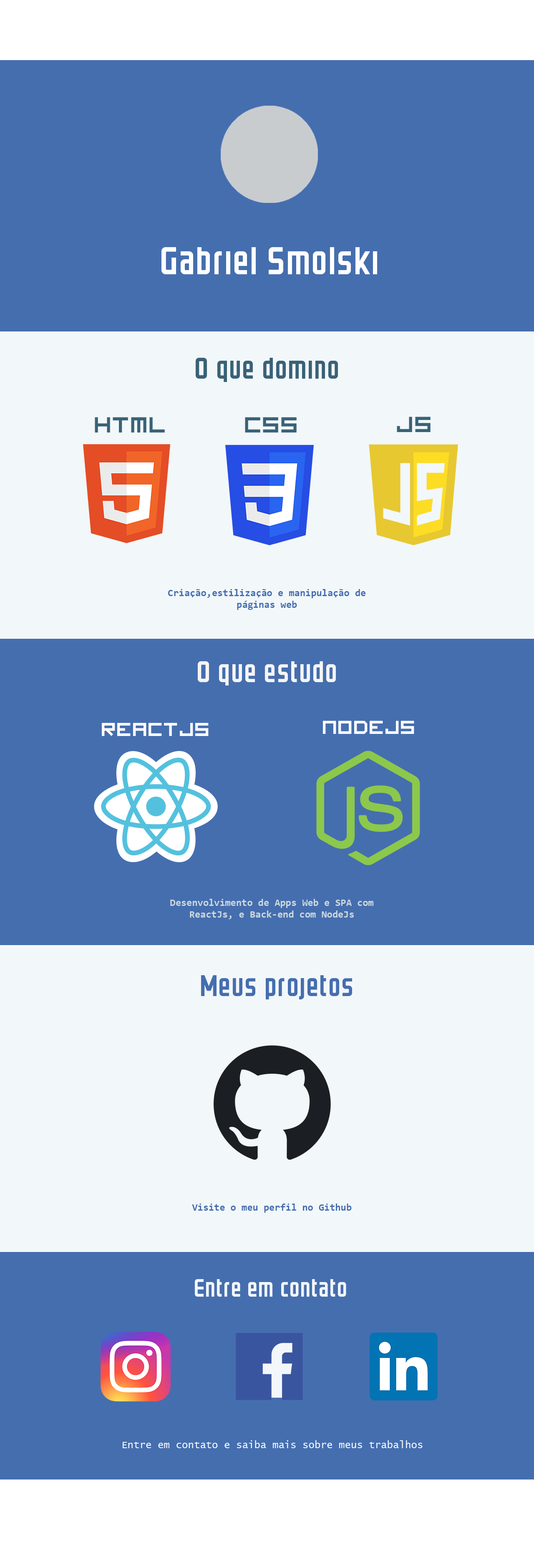
<style>
.page{position:relative;width:534px;height:1568px;background:#456eaf}
.page>*{position:absolute;margin:0}
.t1{font:31.3px "GRAYSTROKE";color:#ffffff}
.t2{font:24.2px "GRAYSTROKE";color:#396277}
.t3{font:10px "Consolas-Bold";color:#456eaf}
.t4{font:24.2px "GRAYSTROKE";color:#f5f5f5}
.t5{font:25.5px "imagine-font";color:#ffffff}
.t6{font:10px "Consolas-Bold";color:#ccd8de}
.t7{font:24.2px "GRAYSTROKE";color:#456eaf}
.t8{font:20px "GRAYSTROKE";color:#f2f7fa}
.t9{font:10px "LucidaConsole";color:#f2f7fa}
</style>
<div class="page">
<p class="t1" style="left:162px;top:247px;width:215px;height:27px">Gabriel Smolski</p>
<p class="t2" style="left:196px;top:358px;width:142px;height:24px">O que domino</p>
<p class="t3" style="left:168px;top:589px;width:198px;height:21px;text-align:center">Criação,estilização e manipulação de páginas web</p>
<p class="t4" style="left:198px;top:661px;width:138px;height:24px">O que estudo</p>
<p class="t5" style="left:102px;top:723px;width:107px;height:13px">ReactJs</p>
<p class="t5" style="left:323px;top:721px;width:92px;height:13px">NODEJS</p>
<p class="t6" style="left:170px;top:899px;width:204px;height:20px;text-align:center">Desenvolvimento de Apps Web e SPA com ReactJs, e Back-end com NodeJs</p>
<p class="t7" style="left:201px;top:975px;width:151px;height:24px">Meus projetos</p>
<p class="t3" style="left:192px;top:1204px;width:160px;height:9px">Visite o meu perfil no Github</p>
<p class="t8" style="left:195px;top:1279px;width:151px;height:18px">Entre em contato</p>
<p class="t9" style="left:123px;top:1440px;width:300px;height:8px">Entre em contato e saiba mais sobre meus trabalhos</p>
</div>
